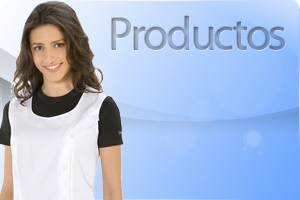
<style>
.page{position:relative;width:300px;height:200px}
.page>*{position:absolute;margin:0}
.t1{font:46.9px "MyriadPro-Regular";letter-spacing:-0.05em}
</style>
<div class="page">
<p class="t1" style="left:111px;top:16px;width:174px;height:34px">Productos</p>
</div>
